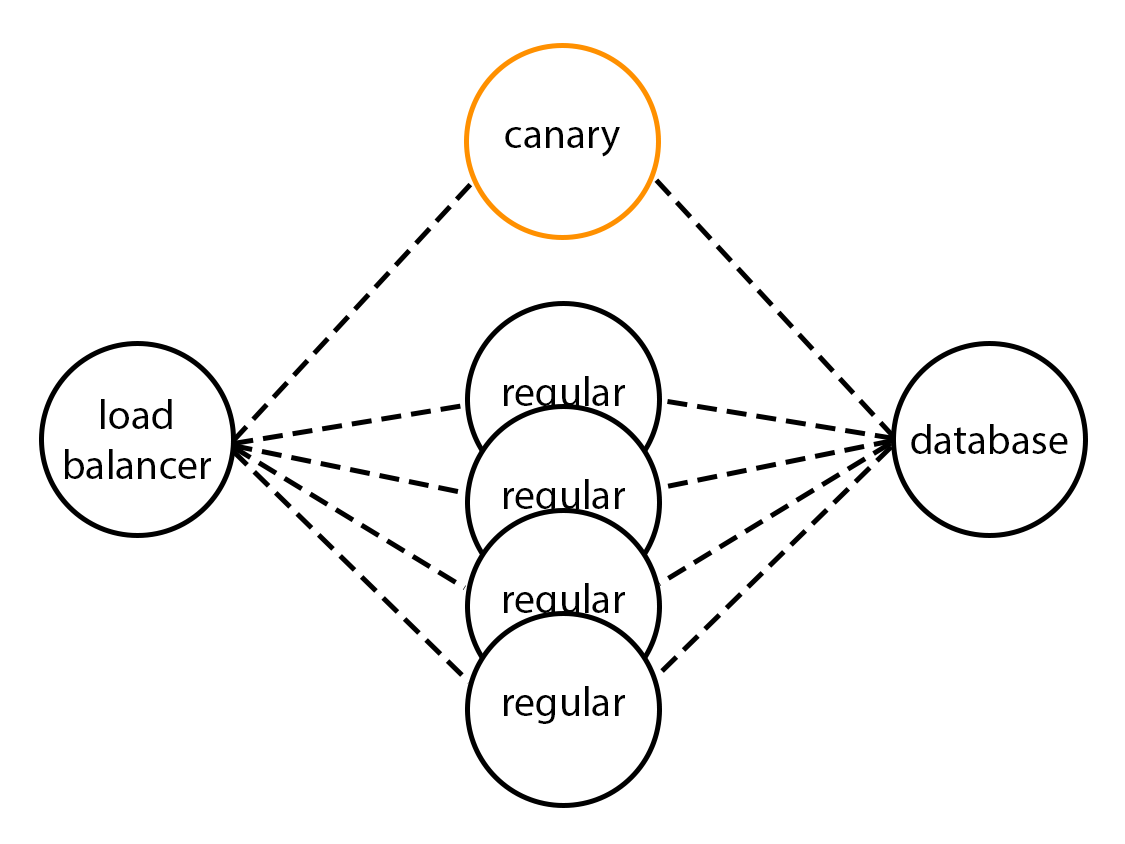
<style>
.page{position:relative;width:1125px;height:844px;background:#ffffff}
.page>*{position:absolute;margin:0}
.t1{font:41.7px "MyriadPro-Regular";color:#000000}
</style>
<div class="page">
<p class="t1" style="left:505px;top:127px;width:115px;height:30px">canary</p>
<p class="t1" style="left:503px;top:376px;width:122px;height:38px">regular</p>
<p class="t1" style="left:64px;top:399px;width:147px;height:80px;text-align:center">load<br>balancer</p>
<p class="t1" style="left:911px;top:424px;width:157px;height:30px">database</p>
<p class="t1" style="left:503px;top:479px;width:122px;height:38px">regular</p>
<p class="t1" style="left:503px;top:583px;width:122px;height:38px">regular</p>
<p class="t1" style="left:503px;top:686px;width:122px;height:38px">regular</p>
</div>
